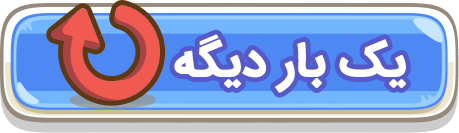
<style>
.page{position:relative;width:459px;height:133px;background:#4e89f3}
.page>*{position:absolute;margin:0}
.t1{font:48px "IRANSansWeb-Bold";color:#ffffff;font-weight:bold}
</style>
<div class="page">
<p class="t1" style="left:174px;top:34px;width:232px;height:59px">یک بار دیگه</p>
</div>
